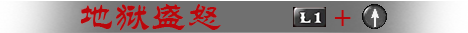
<style>
.page{position:relative;width:468px;height:33px;background:#707070}
.page>*{position:absolute;margin:0}
.t1{font:36px "STLiti";color:#ba060b}
</style>
<div class="page">
<p class="t1" style="left:80px;top:4px;width:271px;height:27px">地狱盛怒   +</p>
</div>
